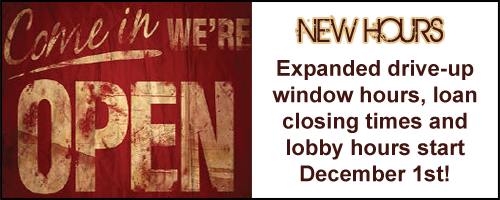
<style>
.page{position:relative;width:500px;height:200px;background:#ffffff}
.page>*{position:absolute;margin:0}
.t1{font:36px "BIRTHOFAHERO";color:#421510}
.t2{font:22px "Arial-BoldMT";color:#421510}
</style>
<div class="page">
<p class="t1" style="left:296px;top:16px;width:147px;height:27px">NEW HOURS</p>
<p class="t2" style="left:272px;top:60px;width:205px;height:122px;text-align:center">Expanded drive-up window hours, loan closing times and lobby hours start December 1st!</p>
</div>
